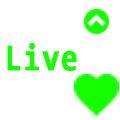
<style>
.page{position:relative;width:120px;height:120px;background:#ffffff}
.page>*{position:absolute;margin:0}
.t1{font:38px "Consolas-Bold";letter-spacing:0.05em;color:#13ff00;font-weight:bold;scale:0.8 1}
</style>
<div class="page">
<p class="t1" style="left:7px;top:43px;width:70px;height:28px">Live</p>
</div>
